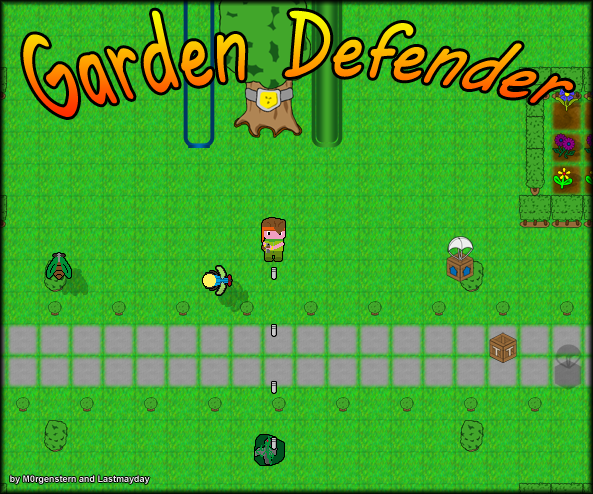
<style>
.page{position:relative;width:593px;height:494px}
.page>*{position:absolute;margin:0}
.t1{font:82.2px "MVBoli";scale:0.81 1}
.t2{font:9px "Arial-BoldMT";color:#eeeeee}
</style>
<div class="page">
<p class="t1" style="left:23px;top:10px;width:550px;height:107px">Garden Defender</p>
<p class="t2" style="left:10px;top:475px;width:140px;height:9px">by M0rgenstern and Lastmayday</p>
</div>
